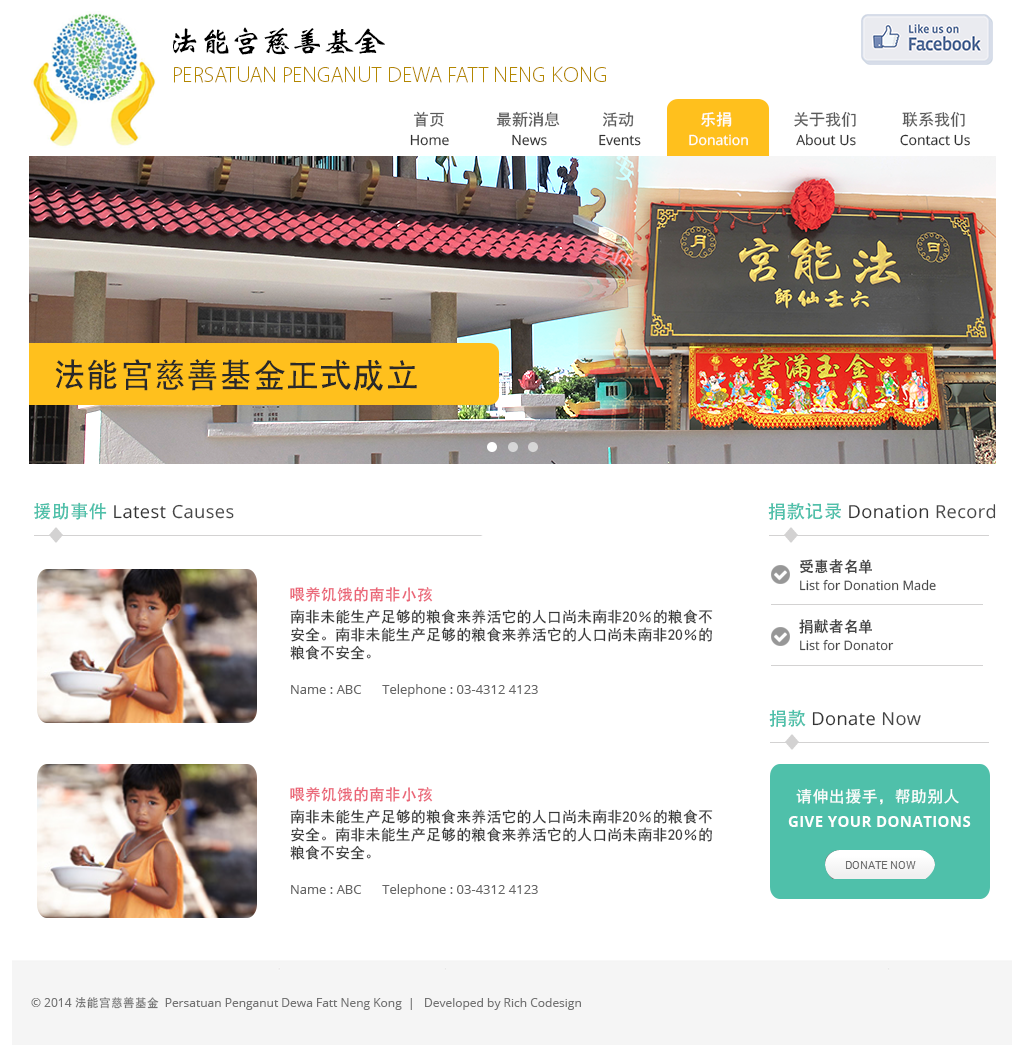
<style>
.page{position:relative;width:1024px;height:1056px;background:#ffffff}
.page>*{position:absolute;margin:0}
.t1{font:30.9px "WeibeiCSEG??NÑ²ó??";letter-spacing:-0.05em;color:#000000;text-transform:uppercase;scale:1.04 1}
.t2{font:21.9px "Vegur-Light";color:#b38701;text-transform:uppercase;scale:1.03 1}
.t3{font:16px "SimHei";color:#5a5a5a}
.t4{font:16px "SimHei";color:#ffffff}
.t5{font:14px "OpenSans";color:#303030}
.t6{font:14px "OpenSans";color:#ffffff}
.t7{font:34.1px "MS-Hei";color:#292929}
.t8{font:18px "OpenSans";letter-spacing:0.025em;color:#343434}
.t9{font:18px "AdobeHeitiStd-Regular";letter-spacing:0.025em;color:#4fc0aa}
.t10{font:18px "OpenSans";letter-spacing:0.025em;color:#474747}
.t11{font:15px/60px "AdobeHeitiStd-Regular";color:#474747}
.t12{font:13px/60px "OpenSans";color:#474747}
.t13{font:16px "MS-Hei";color:#ea6274}
.t14{font:15px/18px "SimHei";color:#353535}
.t15{font:13px/18px "OpenSans";color:#666666}
.t16{font:16px "SimHei";letter-spacing:0.025em;color:#ffffff}
.t17{font:15px "OpenSans-Bold";letter-spacing:0.025em;color:#ffffff}
.t18{font:12px "OpenSans";color:#737373}
.t19{font:12px "MS-Hei";color:#737373}
</style>
<div class="page">
<p class="t1" style="left:173px;top:27px;width:212px;height:28px">法能宫慈善基金</p>
<p class="t2" style="left:174px;top:66px;width:432px;height:17px">PERSATUAN PENGANUT DEWA fatt neng kong</p>
<p class="t3" style="left:413px;top:111px;width:31px;height:16px">首页</p>
<p class="t3" style="left:496px;top:111px;width:64px;height:16px">最新消息</p>
<p class="t3" style="left:603px;top:112px;width:31px;height:15px">活动</p>
<p class="t4" style="left:701px;top:111px;width:31px;height:16px">乐捐</p>
<p class="t3" style="left:794px;top:111px;width:62px;height:16px">关于我们</p>
<p class="t3" style="left:902px;top:111px;width:63px;height:16px">联系我们</p>
<p class="t5" style="left:410px;top:134px;width:560px;height:12px">Home                 News              Events             <span class="t6">Donation</span>             About Us            Contact Us</p>
<p class="t7" style="left:55px;top:359px;width:362px;height:32px">法能宫慈善基金正式成立</p>
<p class="t8" style="left:34px;top:502px;width:200px;height:18px"><span class="t9">援助事件</span> Latest <span class="t10">Causes</span></p>
<p class="t8" style="left:768px;top:502px;width:228px;height:18px"><span class="t9">捐款记录</span> Donation <span class="t10">Record</span></p>
<p class="t11" style="left:799px;top:559px;width:73px;height:75px">受惠者名单<br>捐献者名单</p>
<p class="t12" style="left:800px;top:579px;width:136px;height:72px">List for Donation Made<br>List for Donator</p>
<p class="t13" style="left:290px;top:587px;width:143px;height:15px">喂养饥饿的南非小孩</p>
<p class="t14" style="left:290px;top:609px;width:423px;height:88px;text-align:justify">南非未能生产足够的粮食来养活它的人口尚未南非20％的粮食不安全。南非未能生产足够的粮食来养活它的人口尚未南非20％的粮食不安全。<br><span class="t15"><br>Name : ABC       Telephone : 03-4312 4123</span></p>
<p class="t8" style="left:769px;top:709px;width:152px;height:18px"><span class="t9">捐款</span> Donate <span class="t10">Now</span></p>
<p class="t13" style="left:290px;top:787px;width:143px;height:15px">喂养饥饿的南非小孩</p>
<p class="t16" style="left:796px;top:788px;width:163px;height:17px">请伸出援手，帮助别人</p>
<p class="t14" style="left:290px;top:809px;width:423px;height:88px;text-align:justify">南非未能生产足够的粮食来养活它的人口尚未南非20％的粮食不安全。南非未能生产足够的粮食来养活它的人口尚未南非20％的粮食不安全。<br><span class="t15"><br>Name : ABC       Telephone : 03-4312 4123</span></p>
<p class="t17" style="left:788px;top:816px;width:183px;height:11px">GIVE YOUR DONATIONS</p>
<p class="t18" style="left:31px;top:997px;width:550px;height:13px">© 2014 <span class="t19">法能宫慈善基金 </span>Persatuan Penganut Dewa Fatt Neng Kong  |   Developed by Rich Codesign</p>
</div>
